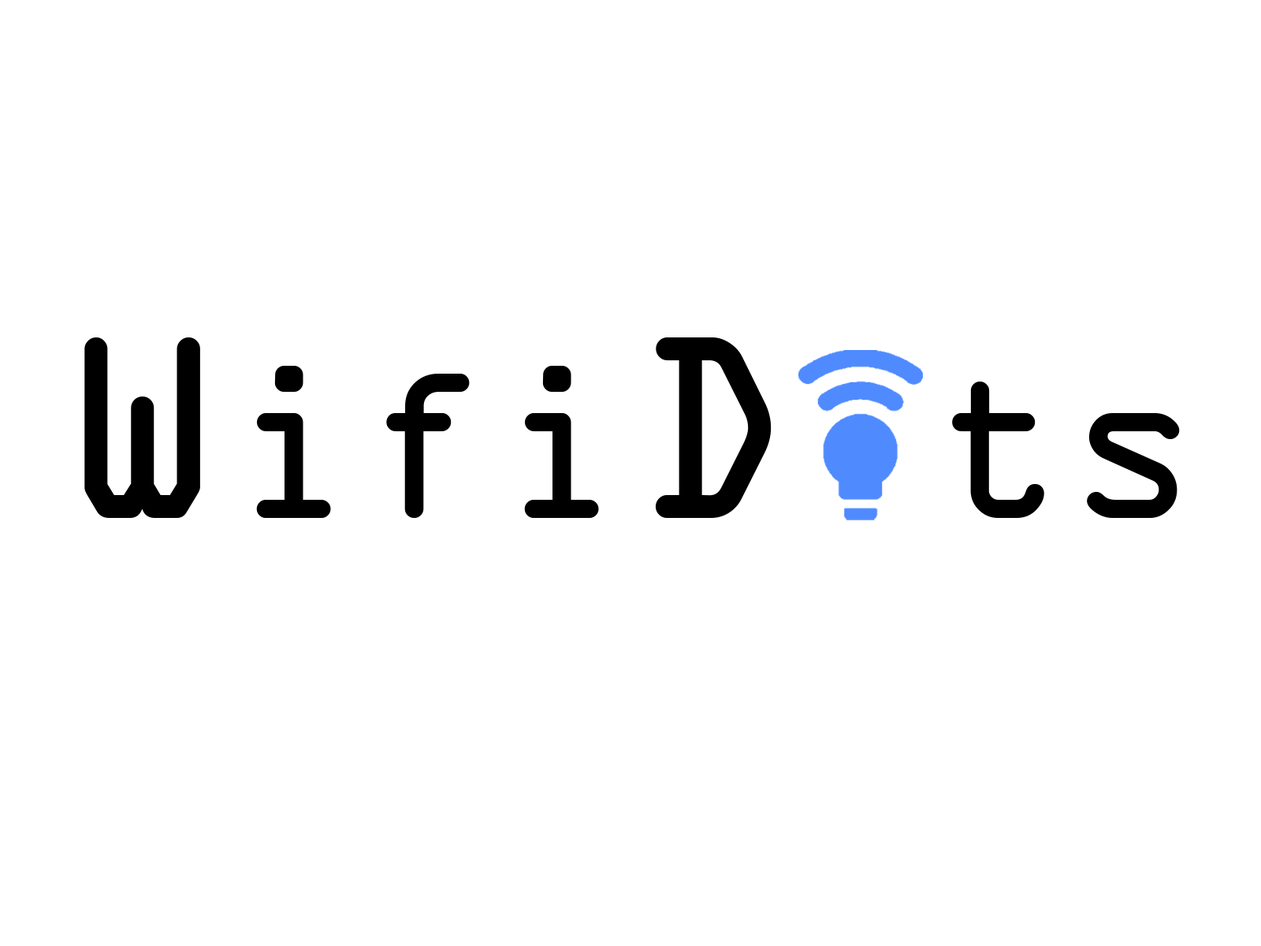
<style>
.page{position:relative;width:1261px;height:946px;background:#ffffff}
.page>*{position:absolute;margin:0}
.t1{font:222.4px "OCRAExtended";color:#000000}
.t2{font:278px "OCRAExtended";color:#000000}
</style>
<div class="page">
<p class="t1" style="left:84px;top:337px;width:1096px;height:181px"><span class="t2">W</span>ifi<span class="t2">D</span> ts</p>
</div>
